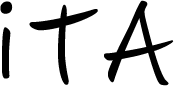
<style>
.page{position:relative;width:174px;height:86px;background:#ffffff}
.page>*{position:absolute;margin:0}
.t1{font:107.6px "SketchFlowPrint";letter-spacing:0.088em;color:#000000}
</style>
<div class="page">
<p class="t1" style="left:0px;top:0px;width:174px;height:86px">iTA</p>
</div>
